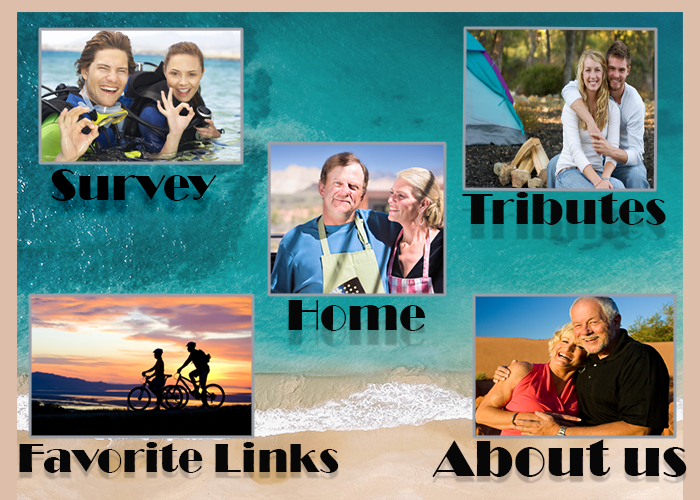
<style>
.page{position:relative;width:700px;height:500px}
.page>*{position:absolute;margin:0}
.t1{font:44.9px "Broadway";color:#000000}
.t2{font:41.9px "Broadway";color:#000000}
.t3{font:53.1px "Broadway";color:#000000}
</style>
<div class="page">
<p class="t1" style="left:51px;top:169px;width:166px;height:32px">Survey</p>
<p class="t1" style="left:462px;top:192px;width:204px;height:33px">Tributes</p>
<p class="t1" style="left:288px;top:300px;width:137px;height:31px">Home</p>
<p class="t2" style="left:19px;top:442px;width:320px;height:31px">Favorite Links</p>
<p class="t3" style="left:432px;top:439px;width:255px;height:38px">About us</p>
</div>
